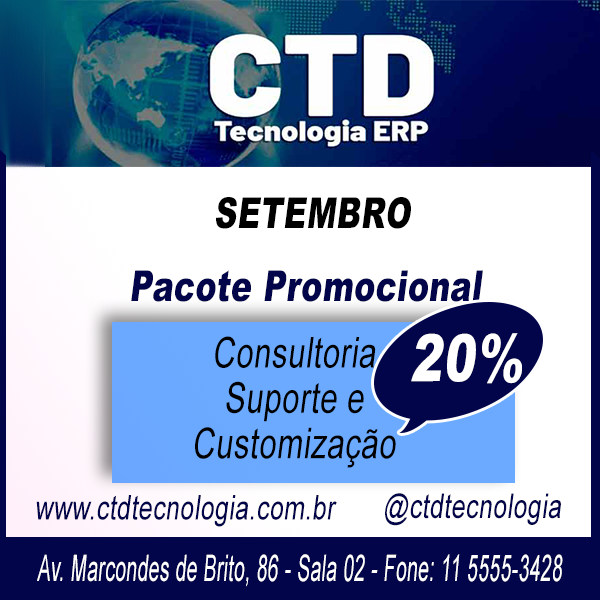
<style>
.page{position:relative;width:600px;height:600px;background:#ffffff}
.page>*{position:absolute;margin:0}
.t1{font:42.5px "Arial-Black";letter-spacing:0.02em;color:#000000;font-style:italic;scale:0.73 1}
.t2{font:42.5px "Arial-Black";letter-spacing:0.02em;color:#02054a;font-style:italic;scale:0.73 1}
.t3{font:42.5px/45.4px "ArialMT";letter-spacing:0.02em;color:#000000;font-style:italic;scale:0.73 1}
.t4{font:65.2px "Arial-Black";letter-spacing:0.02em;color:#ffffff;font-style:italic;scale:0.73 1}
.t5{font:34px "ArialMT";letter-spacing:0.02em;color:#02054a;font-style:italic;scale:0.73 1}
.t6{font:36.9px "ArialMT";letter-spacing:0.02em;color:#ffffff;font-style:italic;scale:0.52 1}
</style>
<div class="page">
<p class="t1" style="left:216px;top:197px;width:195px;height:32px">SETEMBRO</p>
<p class="t2" style="left:131px;top:270px;width:352px;height:32px">Pacote Promocional</p>
<p class="t3" style="left:195px;top:336px;width:201px;height:132px;text-align:center">Consultoria<br>Suporte e<br>Customização</p>
<p class="t4" style="left:411px;top:333px;width:111px;height:51px">20%</p>
<p class="t5" style="left:36px;top:495px;width:301px;height:32px">www.ctdtecnologia.com.br</p>
<p class="t5" style="left:385px;top:493px;width:176px;height:33px">@ctdtecnologia</p>
<p class="t6" style="left:37px;top:554px;width:526px;height:33px">Av. Marcondes de Brito, 86 - Sala 02 - Fone: 11 5555-3428</p>
</div>
